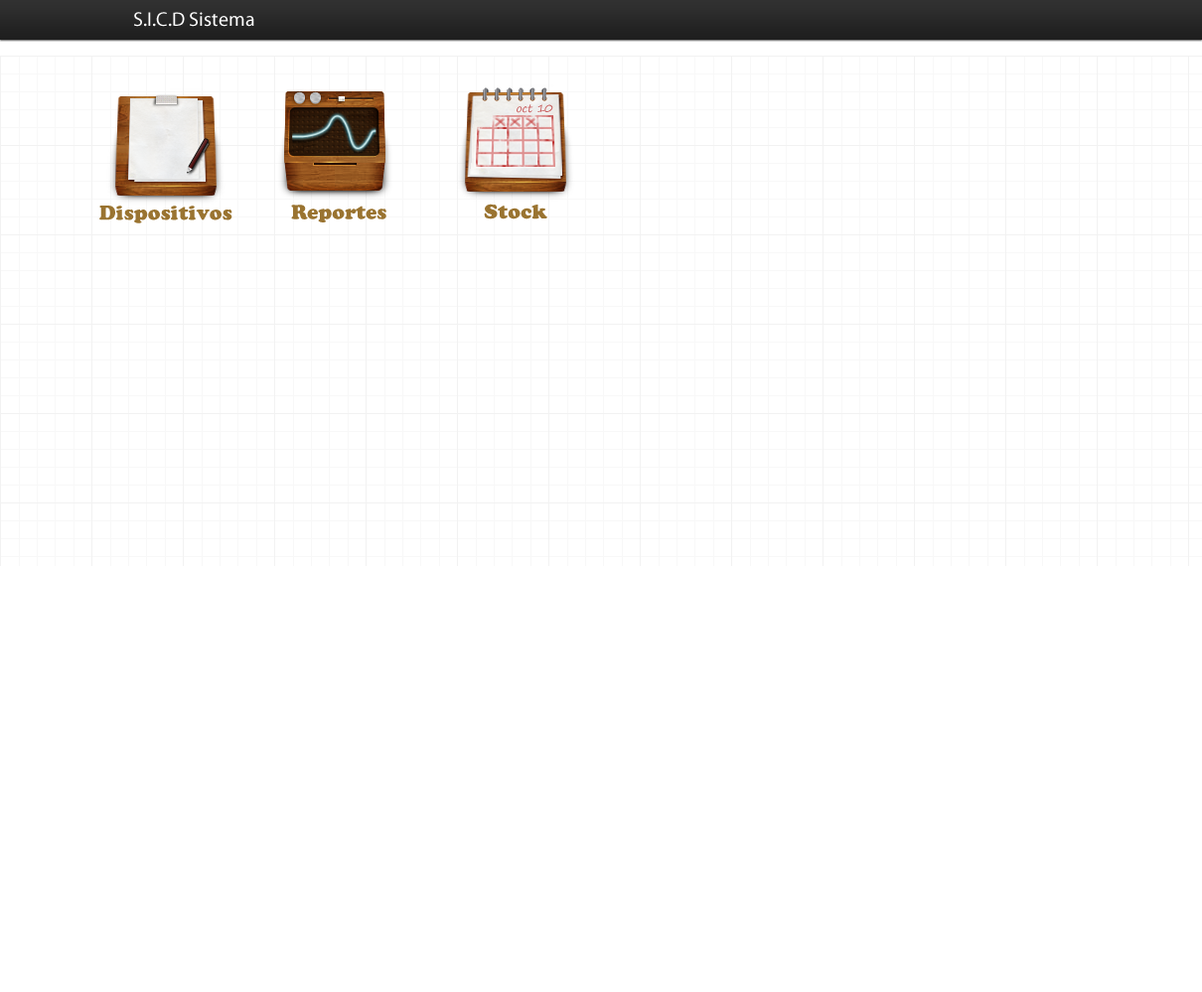
<style>
.page{position:relative;width:1202px;height:992px;background:#ffffff}
.page>*{position:absolute;margin:0}
.t1{font:19.9px "MyriadPro-Regular";color:#ffffff}
.t2{font:19.9px "CooperBlackStd";color:#9a7431}
</style>
<div class="page">
<p class="t1" style="left:134px;top:12px;width:120px;height:15px">S.I.C.D Sistema</p>
<p class="t2" style="left:99px;top:206px;width:133px;height:17px">Dispositivos</p>
<p class="t2" style="left:291px;top:205px;width:95px;height:17px">Reportes</p>
<p class="t2" style="left:484px;top:204px;width:63px;height:15px">Stock</p>
</div>
